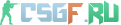
<style>
.page{position:relative;width:121px;height:25px;background:#ffffff}
.page>*{position:absolute;margin:0}
.t1{font:27px "AmazObitaemOstrovV.2";color:#a6d1e8}
.t2{font:27px "AmazObitaemOstrovV.2";color:#e08354}
.t3{font:27px "AmazObitaemOstrovV.2";color:#a3cade}
.t4{font:27px "AmazObitaemOstrovV.2";color:#47cc8e}
</style>
<div class="page">
<p class="t1" style="left:21px;top:0px;width:98px;height:25px">CSG<span class="t2">F</span><span class="t3">.</span><span class="t4">RU</span></p>
</div>
